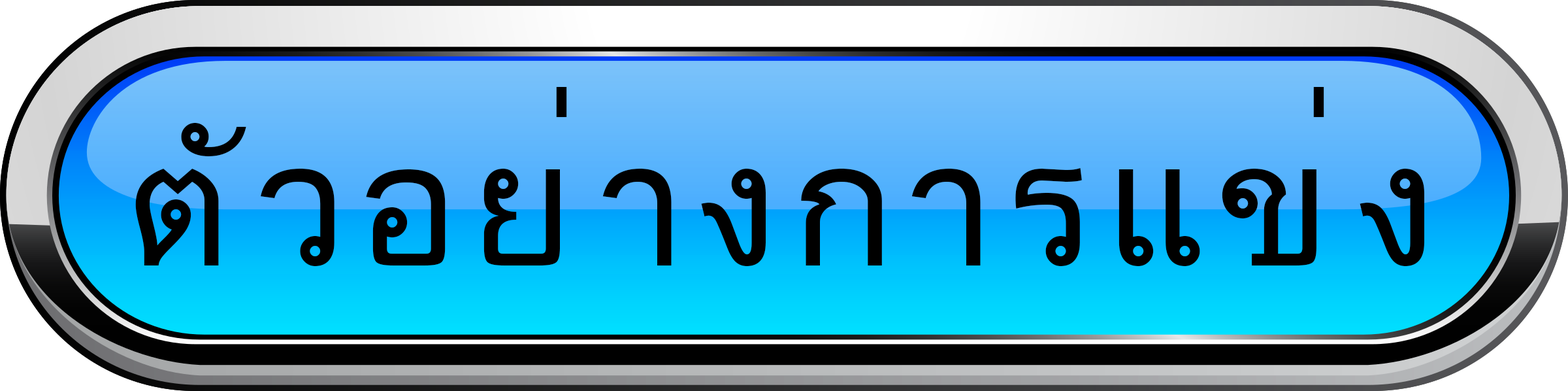
<style>
.page{position:relative;width:1568px;height:391px}
.page>*{position:absolute;margin:0}
.t1{font:172.9px "DokChampa";letter-spacing:0.075em;color:#000000}
</style>
<div class="page">
<p class="t1" style="left:135px;top:87px;width:1289px;height:179px">ตัวอย่างการแข่ง</p>
</div>
